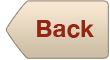
<style>
.page{position:relative;width:110px;height:60px}
.page>*{position:absolute;margin:0}
.t1{font:24px "HelveticaNeue-Bold";color:#942513}
</style>
<div class="page">
<p class="t1" style="left:37px;top:20px;width:57px;height:18px">Back</p>
</div>
